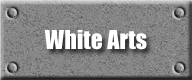
<style>
.page{position:relative;width:192px;height:80px}
.page>*{position:absolute;margin:0}
.t1{font:24px "Impact";color:#ffffff}
</style>
<div class="page">
<p class="t1" style="left:44px;top:30px;width:103px;height:20px">White Arts</p>
</div>
